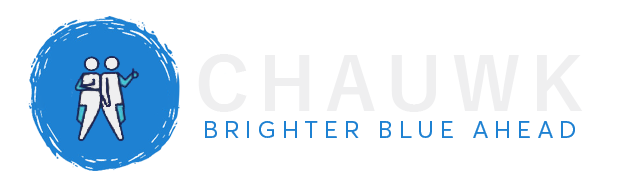
<style>
.page{position:relative;width:619px;height:194px;background:#ffffff}
.page>*{position:absolute;margin:0}
.t1{font:75px "YuGothic-Bold";letter-spacing:0.12em;color:#efeff0}
.t2{font:24px "AvertaDemoPECuttedDemo-Regular";letter-spacing:0.24em;color:#1e81d2;text-transform:uppercase}
</style>
<div class="page">
<p class="t1" style="left:198px;top:54px;width:385px;height:58px">CHAUWK</p>
<p class="t2" style="left:205px;top:121px;width:370px;height:17px">BRIGHTER BLUE AHEAD</p>
</div>
